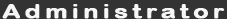
<style>
.page{position:relative;width:227px;height:19px;background:#333333}
.page>*{position:absolute;margin:0}
.t1{font:18.6px "ArialRoundedMTBold";letter-spacing:0.15em;color:#f7f7f7;font-weight:bold;scale:1.36 1}
</style>
<div class="page">
<p class="t1" style="left:2px;top:4px;width:223px;height:15px">Administrator</p>
</div>
